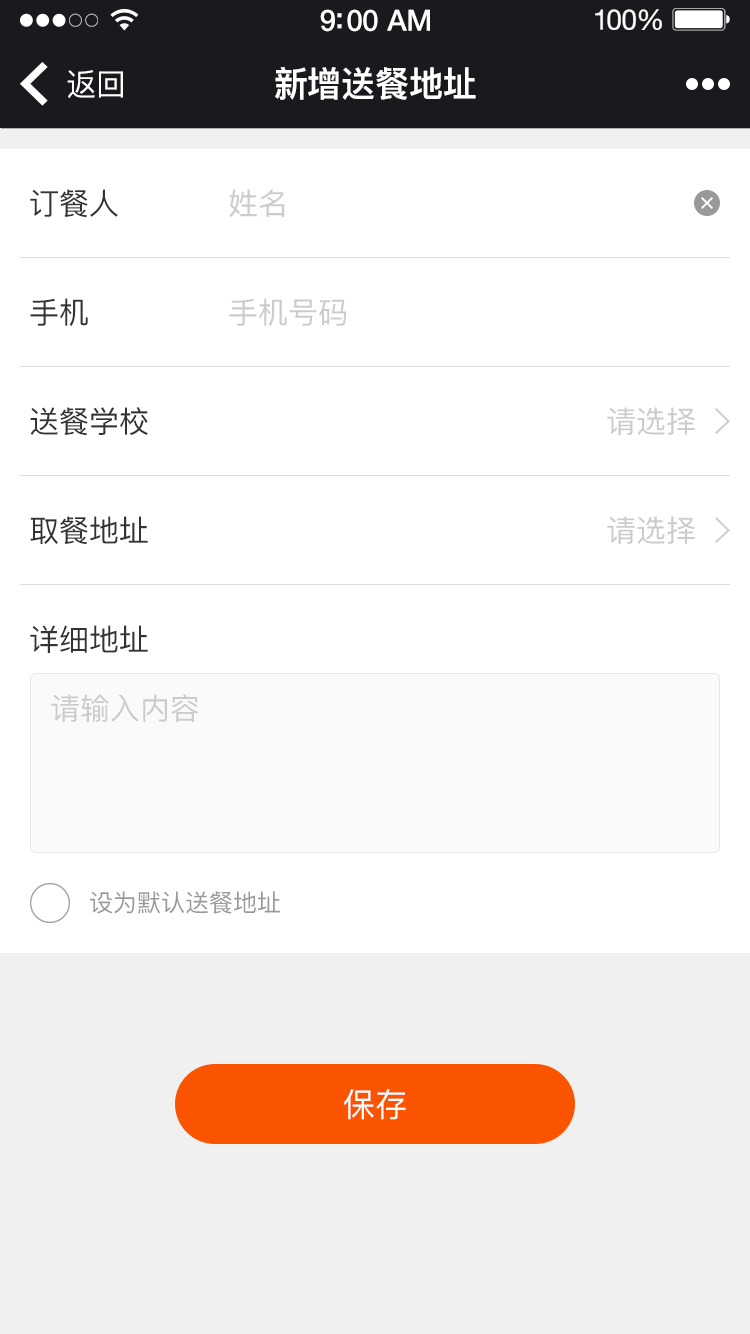
<style>
.page{position:relative;width:750px;height:1334px;background:#ffffff}
.page>*{position:absolute;margin:0}
.t1{font:29.5px "HelveticaNeue-Medium";letter-spacing:-0.02em;color:#ffffff}
.t2{font:28.3px "HelveticaNeue";letter-spacing:-0.02em;color:#ffffff}
.t3{font:30.9px "PingFang-SC-Medium";color:#ffffff;scale:0.97 1}
.t4{font:35px "PingFang-SC-Heavy";color:#ffffff;scale:0.97 1}
.t5{font:30px "PingFang-SC-Medium";color:#333333;text-transform:uppercase}
.t6{font:30px "PingFang-SC-Medium";color:#cccccc;text-transform:uppercase}
.t7{font:24px "PingFang-SC-Medium";color:#999999}
.t8{font:33px "PingFang-SC-Medium";color:#ffffff}
</style>
<div class="page">
<p class="t1" style="left:320px;top:9px;width:110px;height:23px">9:00 AM</p>
<p class="t2" style="left:595px;top:9px;width:67px;height:21px">100%</p>
<p class="t3" style="left:67px;top:70px;width:56px;height:28px">返回</p>
<p class="t4" style="left:275px;top:66px;width:201px;height:34px">新增送餐地址</p>
<p class="t5" style="left:30px;top:189px;width:88px;height:28px">订餐人</p>
<p class="t6" style="left:229px;top:189px;width:56px;height:28px">姓名</p>
<p class="t5" style="left:30px;top:298px;width:58px;height:28px">手机</p>
<p class="t6" style="left:229px;top:298px;width:117px;height:28px">手机号码</p>
<p class="t5" style="left:30px;top:407px;width:118px;height:28px">送餐学校</p>
<p class="t6" style="left:607px;top:407px;width:88px;height:28px">请选择</p>
<p class="t5" style="left:30px;top:516px;width:118px;height:28px">取餐地址</p>
<p class="t6" style="left:607px;top:516px;width:88px;height:28px">请选择</p>
<p class="t5" style="left:30px;top:625px;width:118px;height:28px">详细地址</p>
<p class="t6" style="left:51px;top:694px;width:148px;height:28px">请输入内容</p>
<p class="t7" style="left:90px;top:891px;width:190px;height:23px">设为默认送餐地址</p>
<p class="t8" style="left:344px;top:1089px;width:62px;height:31px">保存</p>
</div>
